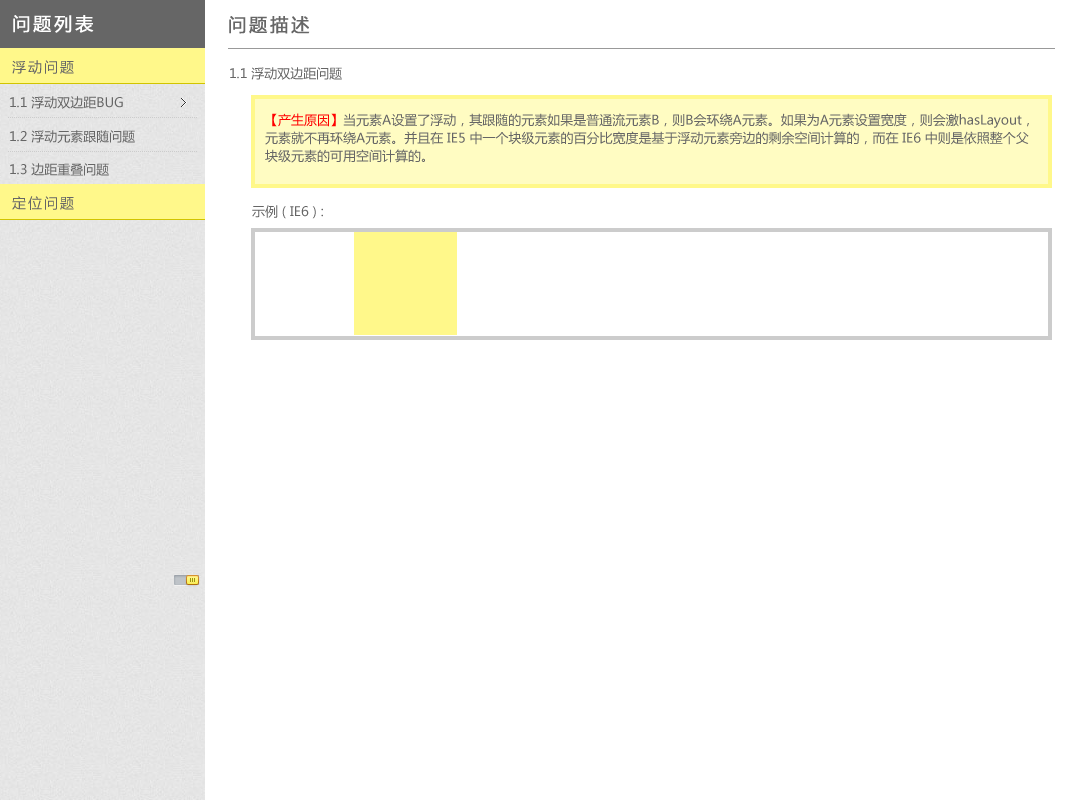
<style>
.page{position:relative;width:1080px;height:800px;background:#ffffff}
.page>*{position:absolute;margin:0}
.t1{font:18px "MicrosoftYaHei";letter-spacing:0.14em;color:#ffffff;font-weight:bold}
.t2{font:18px "MicrosoftYaHei";letter-spacing:0.14em;color:#666666;font-weight:bold}
.t3{font:14px "MicrosoftYaHei";letter-spacing:0.14em;color:#666666}
.t4{font:13px "MicrosoftYaHei";color:#666666}
.t5{font:13px/18px "MicrosoftYaHei";color:#666666}
.t6{font:13px/18px "MicrosoftYaHei";color:#ff0000}
</style>
<div class="page">
<p class="t1" style="left:13px;top:15px;width:81px;height:18px">问题列表</p>
<p class="t2" style="left:229px;top:16px;width:81px;height:18px">问题描述</p>
<p class="t3" style="left:12px;top:60px;width:62px;height:14px">浮动问题</p>
<p class="t4" style="left:230px;top:67px;width:112px;height:13px">1.1 浮动双边距问题</p>
<p class="t4" style="left:10px;top:96px;width:113px;height:13px">1.1 浮动双边距BUG</p>
<p class="t5" style="left:265px;top:113px;width:764px;height:50px"><span class="t6">【产生原因】</span>当元素A设置了浮动，其跟随的元素如果是普通流元素B，则B会环绕A元素。如果为A元素设置宽度，则会激hasLayout，元素就不再环绕A元素。并且在 IE5 中一个块级元素的百分比宽度是基于浮动元素旁边的剩余空间计算的，而在 IE6 中则是依照整个父<br>块级元素的可用空间计算的。</p>
<p class="t4" style="left:10px;top:130px;width:125px;height:13px">1.2 浮动元素跟随问题</p>
<p class="t4" style="left:10px;top:163px;width:99px;height:13px">1.3 边距重叠问题</p>
<p class="t3" style="left:12px;top:196px;width:62px;height:14px">定位问题</p>
<p class="t4" style="left:252px;top:205px;width:71px;height:14px">示例 ( IE6 ) :</p>
</div>
